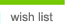
<style>
.page{position:relative;width:65px;height:26px;background:#ffffff}
.page>*{position:absolute;margin:0}
.t1{font:12px "ArialMT";color:#717171}
</style>
<div class="page">
<p class="t1" style="left:10px;top:12px;width:43px;height:10px">wish list</p>
</div>
